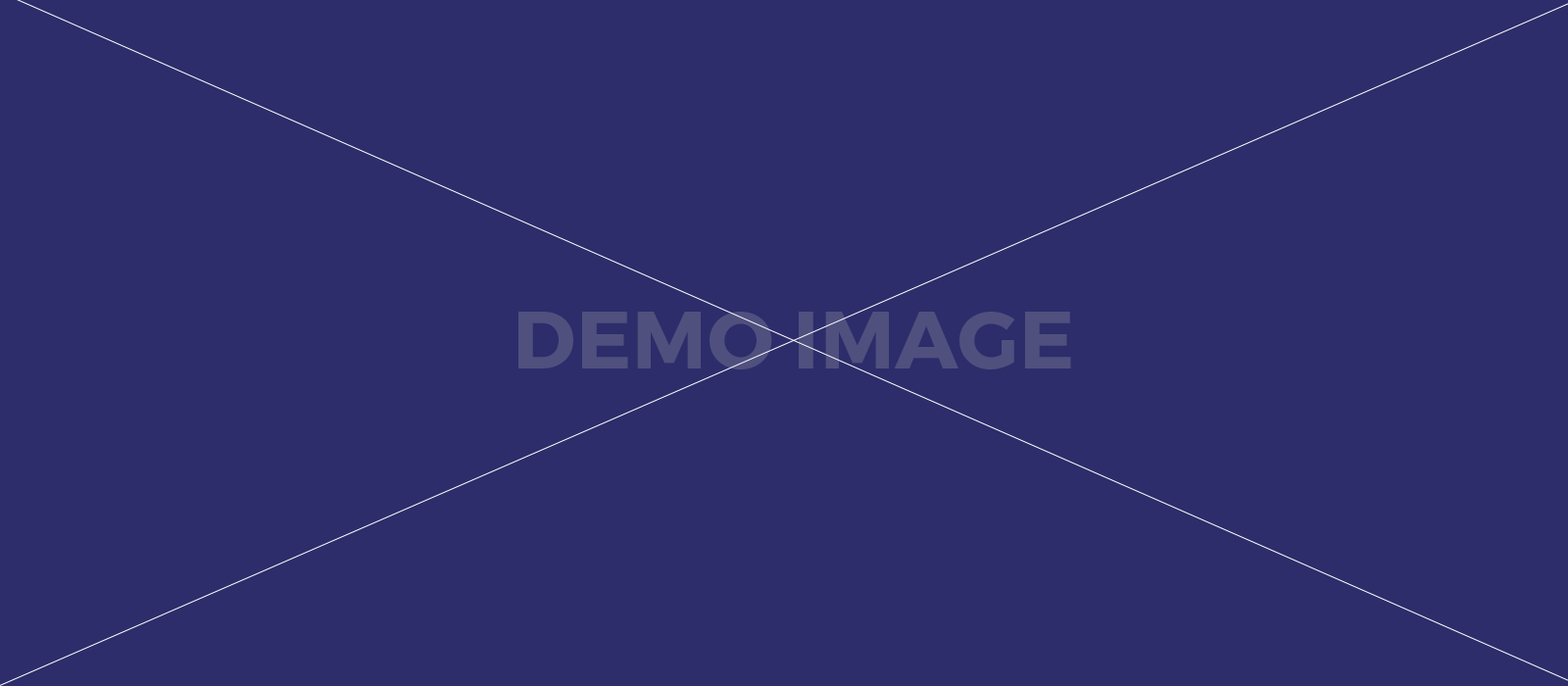
<style>
.page{position:relative;width:1568px;height:686px;background:#2d2d6b}
.page>*{position:absolute;margin:0}
.t1{font:81.6px "Montserrat-Bold";color:#50507f;text-transform:uppercase}
</style>
<div class="page">
<p class="t1" style="left:518px;top:312px;width:553px;height:57px">DEMO IMAGE</p>
</div>
